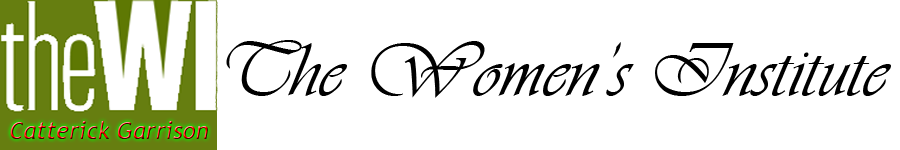
<style>
.page{position:relative;width:900px;height:150px;background:#ffffff}
.page>*{position:absolute;margin:0}
.t1{font:80px "Vivaldii";color:#000000}
.t2{font:24px "TrebuchetMS-Italic"}
</style>
<div class="page">
<p class="t1" style="left:226px;top:40px;width:665px;height:58px">The Women’s Institute</p>
<p class="t2" style="left:10px;top:121px;width:198px;height:18px">Catterick Garrison</p>
</div>
